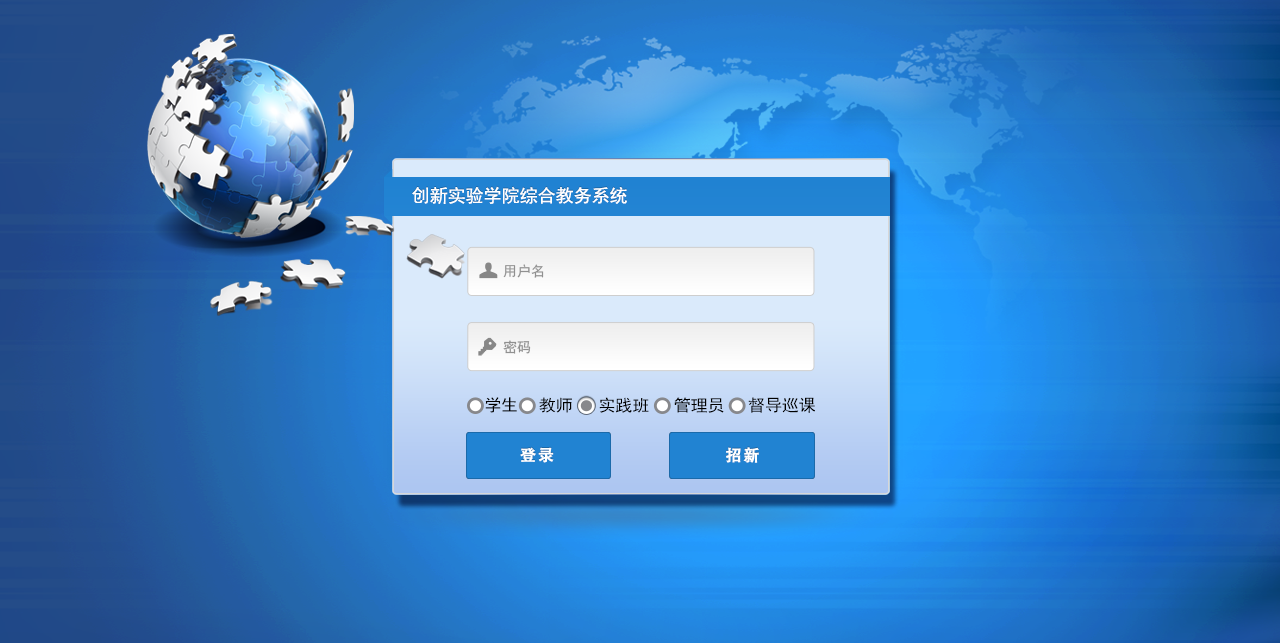
<style>
.page{position:relative;width:1280px;height:643px}
.page>*{position:absolute;margin:0}
.t1{font:18px "SimHei";color:#ffffff;text-transform:uppercase}
.t2{font:14px "SimHei";color:#909090}
.t3{font:16.6px "SimHei";color:#000000}
.t4{font:16px "AdobeHeitiStd-Regular";letter-spacing:0.1em;color:#ffffff;text-transform:uppercase;font-weight:bold}
</style>
<div class="page">
<p class="t1" style="left:412px;top:186px;width:215px;height:18px">创新实验学院综合教务系统</p>
<p class="t2" style="left:503px;top:264px;width:41px;height:14px">用户名</p>
<p class="t2" style="left:503px;top:340px;width:28px;height:14px">密码</p>
<p class="t3" style="left:485px;top:397px;width:32px;height:16px">学生</p>
<p class="t3" style="left:539px;top:397px;width:33px;height:16px">教师</p>
<p class="t3" style="left:599px;top:397px;width:50px;height:16px">实践班</p>
<p class="t3" style="left:674px;top:397px;width:50px;height:16px">管理员</p>
<p class="t3" style="left:748px;top:397px;width:67px;height:16px">督导巡课</p>
<p class="t4" style="left:520px;top:447px;width:34px;height:16px">登录</p>
<p class="t4" style="left:726px;top:447px;width:33px;height:16px">招新</p>
</div>
